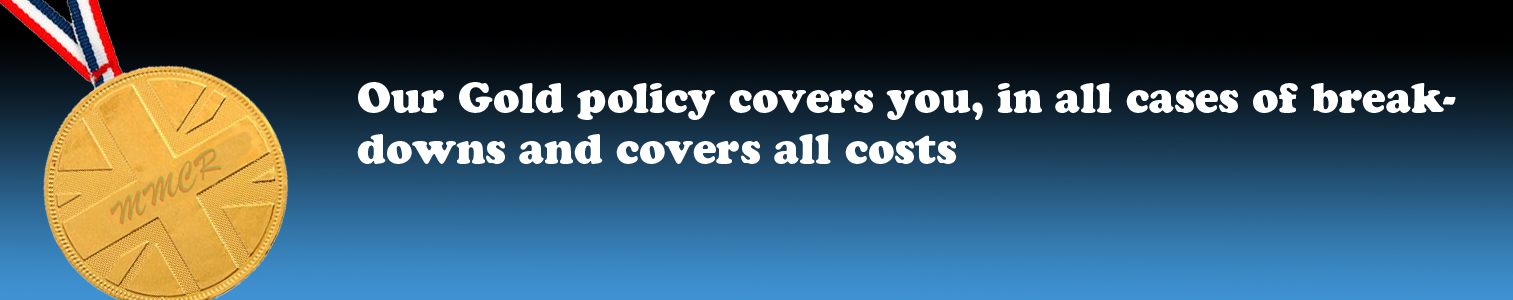
<style>
.page{position:relative;width:1513px;height:300px}
.page>*{position:absolute;margin:0}
.t1{font:41.9px "CooperBlackStd";color:#ffffff}
</style>
<div class="page">
<p class="t1" style="left:357px;top:82px;width:1099px;height:82px">Our Gold policy covers you, in all cases of breakdowns and covers all costs</p>
</div>
